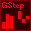
<style>
.page{position:relative;width:31px;height:31px;background:#320000}
.page>*{position:absolute;margin:0}
.t1{font:8px "Small Fonts";color:#ff0000}
</style>
<div class="page">
<p class="t1" style="left:2px;top:2px;width:22px;height:8px">GStep</p>
</div>
